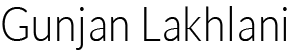
<style>
.page{position:relative;width:291px;height:50px;background:#ffffff}
.page>*{position:absolute;margin:0}
.t1{font:48.1px "Lato-Light";letter-spacing:0.022em;color:#000000;scale:0.85 1}
</style>
<div class="page">
<p class="t1" style="left:2px;top:6px;width:285px;height:44px">Gunjan Lakhlani</p>
</div>
